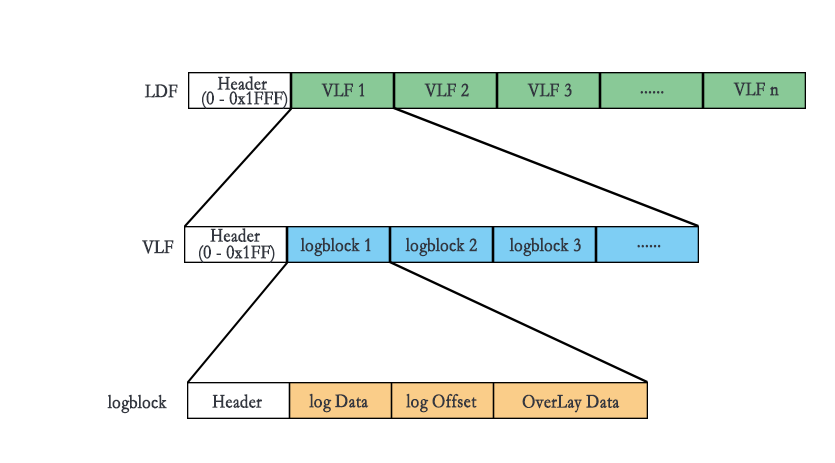
<style>
.page{position:relative;width:835px;height:463px;background:#ffffff}
.page>*{position:absolute;margin:0}
.t1{font:19.4px "STKaiti";color:#333740;font-weight:bold;scale:0.86 1}
</style>
<div class="page">
<p class="t1" style="left:217px;top:76px;width:50px;height:14px">Header</p>
<p class="t1" style="left:144px;top:84px;width:34px;height:14px">LDF</p>
<p class="t1" style="left:321px;top:83px;width:44px;height:14px">VLF 1</p>
<p class="t1" style="left:424px;top:83px;width:45px;height:14px">VLF 2</p>
<p class="t1" style="left:527px;top:83px;width:45px;height:14px">VLF 3</p>
<p class="t1" style="left:733px;top:82px;width:46px;height:14px">VLF n</p>
<p class="t1" style="left:202px;top:91px;width:86px;height:18px">(0 - 0x1FFF)</p>
<p class="t1" style="left:640px;top:91px;width:24px;height:3px">......</p>
<p class="t1" style="left:210px;top:228px;width:50px;height:14px">Header</p>
<p class="t1" style="left:142px;top:240px;width:32px;height:14px">VLF</p>
<p class="t1" style="left:199px;top:245px;width:76px;height:18px">(0 - 0x1FF)</p>
<p class="t1" style="left:300px;top:237px;width:71px;height:20px">logblock 1</p>
<p class="t1" style="left:405px;top:237px;width:72px;height:20px">logblock 2</p>
<p class="t1" style="left:509px;top:237px;width:72px;height:20px">logblock 3</p>
<p class="t1" style="left:637px;top:244px;width:24px;height:4px">......</p>
<p class="t1" style="left:107px;top:394px;width:60px;height:20px">logblock</p>
<p class="t1" style="left:212px;top:394px;width:50px;height:14px">Header</p>
<p class="t1" style="left:309px;top:393px;width:60px;height:20px">log Data</p>
<p class="t1" style="left:406px;top:393px;width:71px;height:20px">log Offset</p>
<p class="t1" style="left:522px;top:394px;width:98px;height:19px">OverLay Data</p>
</div>
